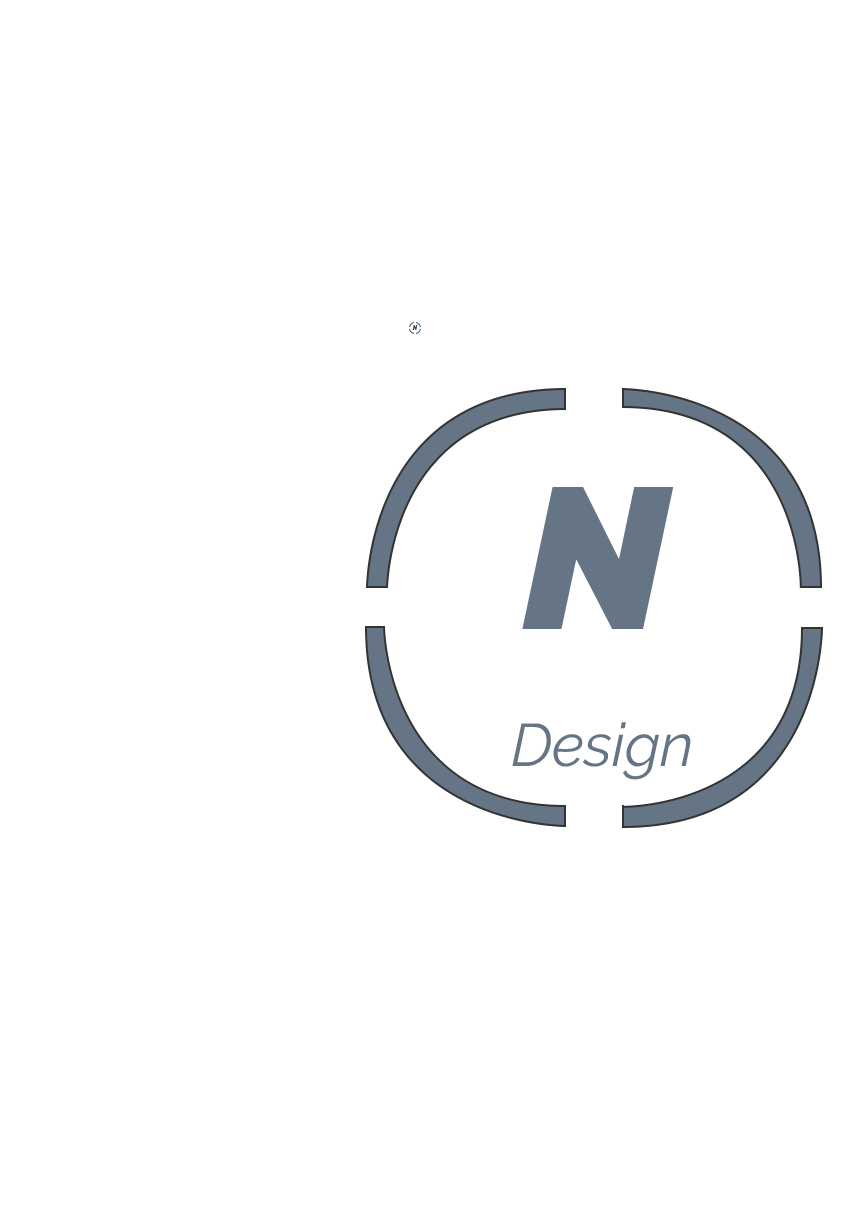
<style>
.page{position:relative;width:868px;height:1212px;background:#ffffff}
.page>*{position:absolute;margin:0}
.t1{font:6px "Raleway-BlackItalic";color:#3e5367}
.t2{font:200px "Raleway-BlackItalic";color:#657585}
.t3{font:60px "Raleway-Italic";color:#657585}
</style>
<div class="page">
<p class="t1" style="left:412px;top:325px;width:6px;height:5px">N</p>
<p class="t2" style="left:522px;top:487px;width:152px;height:142px">N</p>
<p class="t3" style="left:512px;top:722px;width:179px;height:58px">Design</p>
</div>
